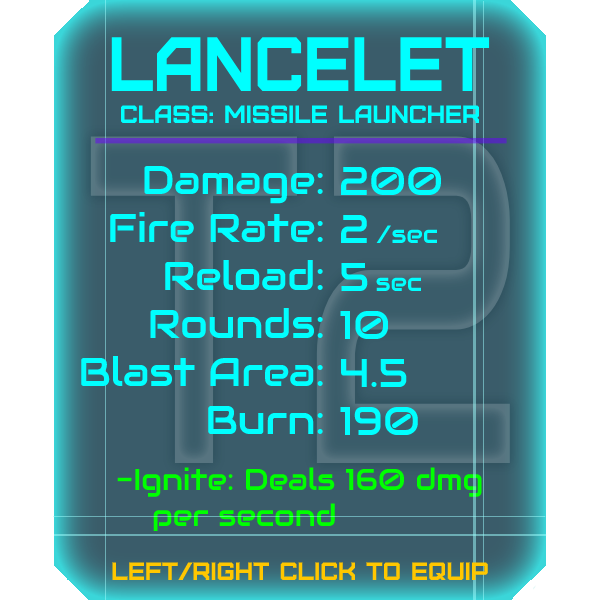
<style>
.page{position:relative;width:600px;height:600px;background:#3a5c6a}
.page>*{position:absolute;margin:0}
.t1{font:76.8px "Furore";color:#00ffff;scale:0.9 1}
.t2{font:25px "Furore";color:#00ffff}
.t3{font:40px "Audiowide-Regular";color:#00ffff}
.t4{font:25px "Audiowide-Regular";color:#00ffff}
.t5{font:30px "Audiowide-Regular";color:#00ff00}
.t6{font:40px "Audiowide-Regular";color:#00ff00}
.t7{font:25px "Furore";color:#ffc700}
</style>
<div class="page">
<p class="t1" style="left:111px;top:37px;width:379px;height:54px">lancelet</p>
<p class="t2" style="left:120px;top:105px;width:360px;height:18px">Class: missile launcher</p>
<p class="t3" style="left:81px;top:165px;width:242px;height:269px;text-align:right">Damage:<br>Fire Rate:<br>Reload:<br>Rounds:<br>Blast Area:<br>Burn:</p>
<p class="t3" style="left:340px;top:166px;width:101px;height:269px">200<br>2 <span class="t4">/sec<br></span>5 <span class="t4">sec<br></span>10<br>4.5<br>190</p>
<p class="t5" style="left:117px;top:467px;width:365px;height:64px"><span class="t6"><br><br><br><br><br><br></span>-Ignite: Deals 160 dmg<br> per second</p>
<p class="t7" style="left:112px;top:562px;width:376px;height:18px">left/right click to equip</p>
</div>
